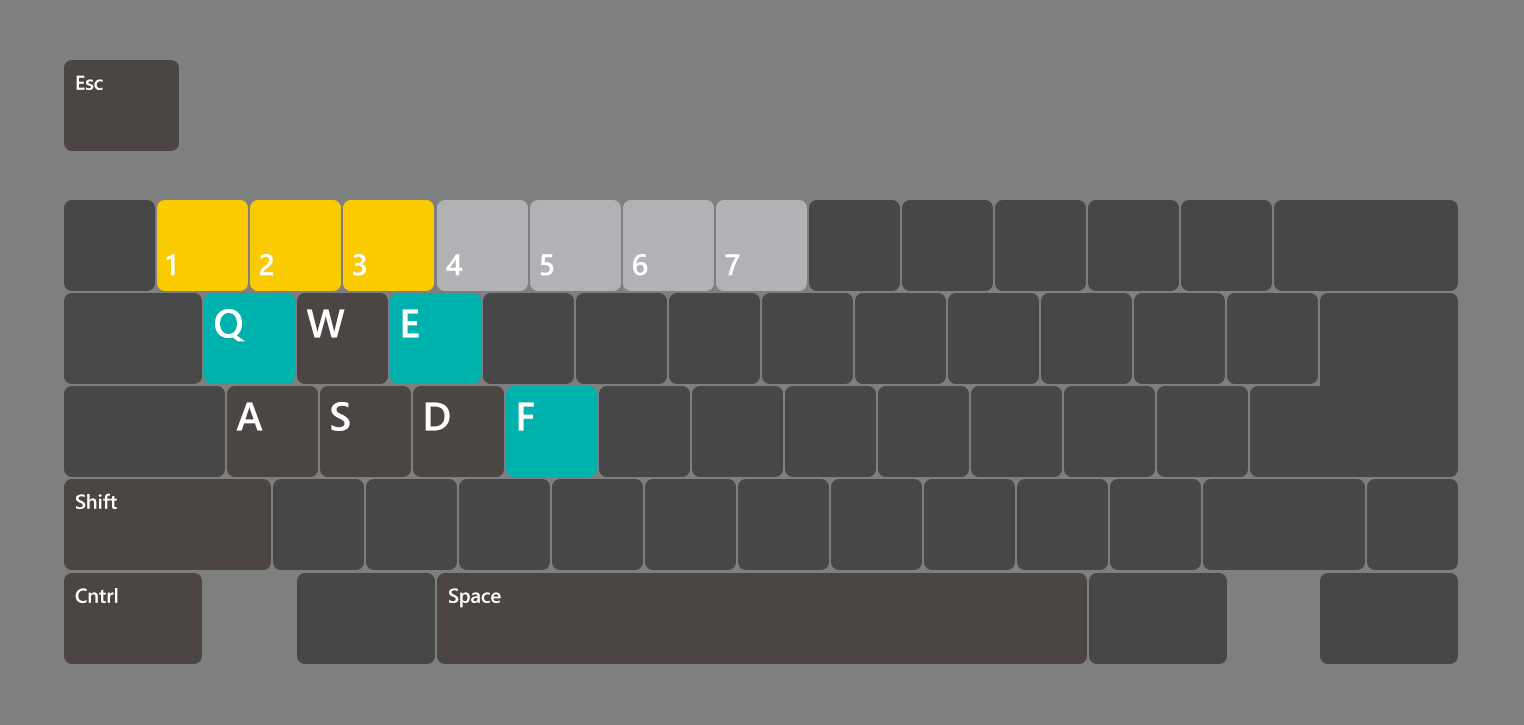
<style>
.page{position:relative;width:1524px;height:725px;background:#7f7f7f}
.page>*{position:absolute;margin:0}
.t1{font:20px "SegoeUI-Semibold";color:#ffffff}
.t2{font:30px "SegoeUI-Semibold";color:#ffffff}
.t3{font:40px "SegoeUI-Semibold";color:#ffffff}
</style>
<div class="page">
<p class="t1" style="left:76px;top:75px;width:27px;height:15px">Esc</p>
<p class="t2" style="left:166px;top:254px;width:9px;height:22px">1</p>
<p class="t2" style="left:260px;top:254px;width:13px;height:22px">2</p>
<p class="t2" style="left:353px;top:254px;width:13px;height:22px">3</p>
<p class="t2" style="left:446px;top:254px;width:17px;height:22px">4</p>
<p class="t2" style="left:541px;top:254px;width:13px;height:22px">5</p>
<p class="t2" style="left:633px;top:254px;width:15px;height:22px">6</p>
<p class="t2" style="left:725px;top:254px;width:15px;height:22px">7</p>
<p class="t3" style="left:215px;top:309px;width:30px;height:33px">Q</p>
<p class="t3" style="left:306px;top:309px;width:39px;height:29px">W</p>
<p class="t3" style="left:402px;top:309px;width:17px;height:29px">E</p>
<p class="t3" style="left:236px;top:402px;width:27px;height:29px">A</p>
<p class="t3" style="left:331px;top:402px;width:19px;height:29px">S</p>
<p class="t3" style="left:425px;top:402px;width:25px;height:29px">D</p>
<p class="t3" style="left:518px;top:402px;width:16px;height:29px">F</p>
<p class="t1" style="left:76px;top:493px;width:41px;height:16px">Shift</p>
<p class="t1" style="left:75px;top:588px;width:43px;height:15px">Cntrl</p>
<p class="t1" style="left:449px;top:588px;width:52px;height:20px">Space</p>
</div>
